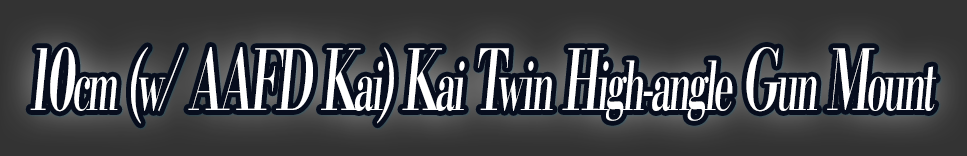
<style>
.page{position:relative;width:967px;height:156px}
.page>*{position:absolute;margin:0}
.t1{font:67.2px "KochoStd-Heavy";letter-spacing:-0.08em;color:#ffffff;font-style:italic;scale:0.54 1}
.t2{font:84px "KochoStd-Heavy";letter-spacing:-0.08em;color:#ffffff;font-style:italic;scale:0.54 1}
</style>
<div class="page">
<p class="t1" style="left:30px;top:47px;width:906px;height:77px"><span class="t2">10</span>cm<span class="t2"> (</span>w<span class="t2">/ AAFD K</span>ai<span class="t2">) K</span>ai<span class="t2"> T</span>win<span class="t2"> H</span>igh-angle<span class="t2"> G</span>un <span class="t2">M</span>ount</p>
</div>
